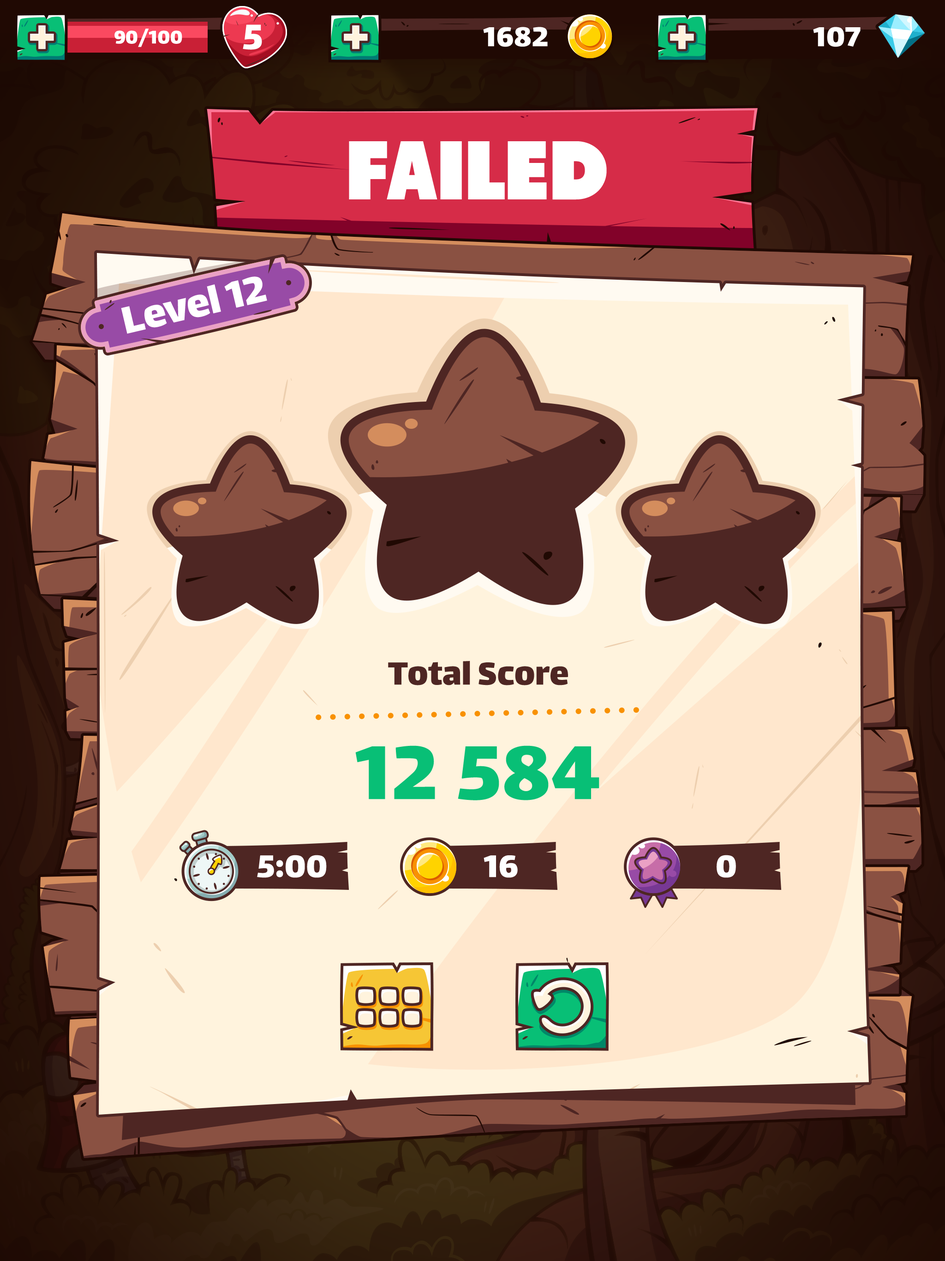
<style>
.page{position:relative;width:945px;height:1261px}
.page>*{position:absolute;margin:0}
.t1{font:57.2px "Lalezar-Regular";color:#fff3dd}
.t2{font:22.2px "Lalezar-Regular";color:#ffffff}
.t3{font:42.5px "Lalezar-Regular";color:#ffffff}
.t4{font:33.2px "Lalezar-Regular";color:#ffffff}
.t5{font:83.1px "Tondu-Beta";color:#ffffff;text-transform:uppercase}
.t6{font:46.2px "Lalezar-Regular";color:#ffffff}
.t7{font:38.8px "Lalezar-Regular";color:#4e2623}
.t8{font:92.3px "Lalezar-Regular";color:#08bf76}
.t9{font:92.3px "Lalezar-Regular";letter-spacing:0.2em;color:#08bf76}
.t10{font:37.9px "Lalezar-Regular";color:#ffffff}
</style>
<div class="page">
<p class="t1" style="left:30px;top:25px;width:24px;height:24px">+</p>
<p class="t2" style="left:114px;top:29px;width:68px;height:18px">90/100</p>
<p class="t3" style="left:243px;top:24px;width:19px;height:26px">5</p>
<p class="t1" style="left:344px;top:25px;width:24px;height:24px">+</p>
<p class="t4" style="left:483px;top:27px;width:65px;height:20px">1682</p>
<p class="t1" style="left:670px;top:25px;width:24px;height:24px">+</p>
<p class="t4" style="left:813px;top:27px;width:48px;height:20px">107</p>
<p class="t5" style="left:349px;top:141px;width:258px;height:59px">failed</p>
<p class="t6" style="left:121px;top:277px;width:146px;height:57px;rotate:-13deg">Level 12</p>
<p class="t7" style="left:388px;top:661px;width:180px;height:25px">Total Score</p>
<p class="t8" style="left:355px;top:746px;width:245px;height:54px">1<span class="t9">2</span>584</p>
<p class="t10" style="left:257px;top:855px;width:70px;height:23px">5:00</p>
<p class="t10" style="left:484px;top:855px;width:34px;height:23px">16</p>
<p class="t10" style="left:717px;top:855px;width:19px;height:23px">0</p>
</div>
